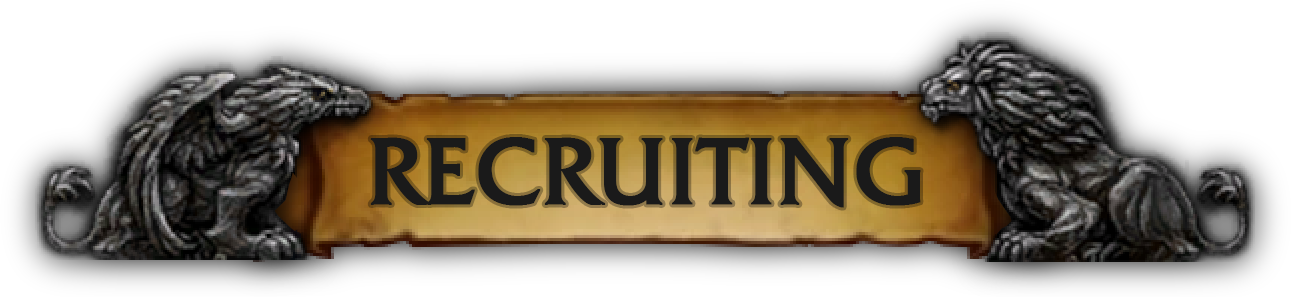
<style>
.page{position:relative;width:1291px;height:297px;background:#ffffff}
.page>*{position:absolute;margin:0}
.t1{font:93.3px "FrizQuadrataC";letter-spacing:0.01em;color:#1a1a1a;font-weight:bold}
</style>
<div class="page">
<p class="t1" style="left:370px;top:137px;width:551px;height:71px">RECRUITING</p>
</div>
